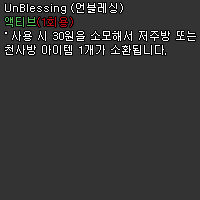
<style>
.page{position:relative;width:200px;height:200px;background:#333333}
.page>*{position:absolute;margin:0}
.t1{font:11px/14px "Dotum";color:#ffffff}
.t2{font:11px/14px "Dotum";color:#56c45b}
.t3{font:11px/14px "Dotum";color:#be0b0f}
</style>
<div class="page">
<p class="t1" style="left:5px;top:3px;width:191px;height:52px">UnBlessing (언블레싱)<br><span class="t2">액티브</span><span class="t3">(1회용)<br></span>˚ 사용 시 30원을 소모해서 저주방 또는<br>천사방 아이템 1개가 소환됩니다.</p>
</div>
